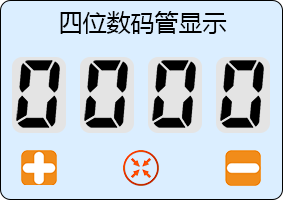
<style>
.page{position:relative;width:283px;height:200px;background:#dbeeff}
.page>*{position:absolute;margin:0}
.t1{font:24px "MicrosoftYaHei";color:#000000;font-variant:small-caps}
</style>
<div class="page">
<p class="t1" style="left:60px;top:11px;width:167px;height:23px">四位数码管显示</p>
</div>
